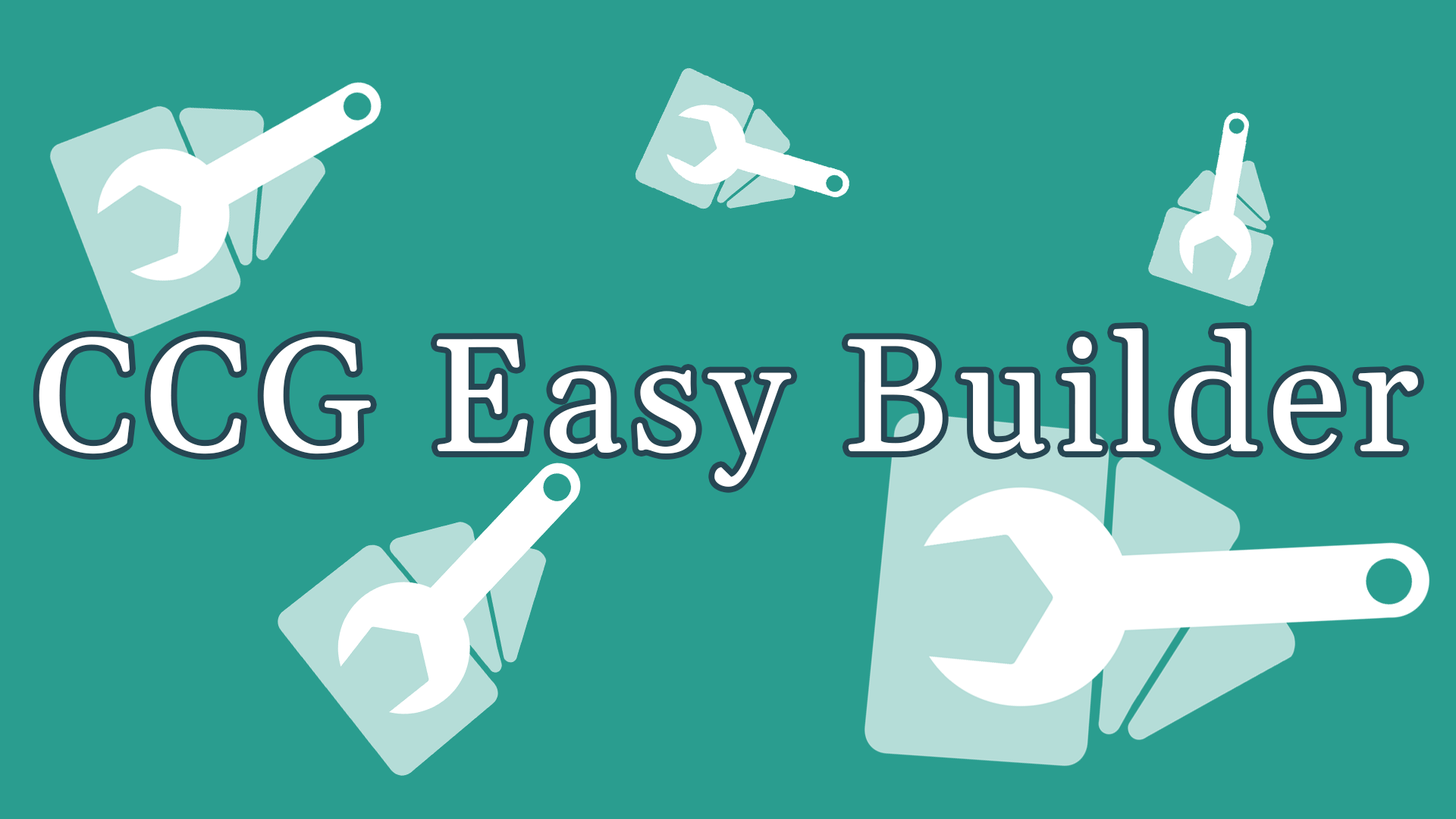
<style>
.page{position:relative;width:1456px;height:819px;background:#2a9d8f}
.page>*{position:absolute;margin:0}
.t1{font:161.1px "Gelasio-Regular";letter-spacing:0.05em;color:#ffffff}
</style>
<div class="page">
<p class="t1" style="left:39px;top:328px;width:1379px;height:159px">CCG Easy Builder</p>
</div>
